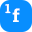
<style>
.page{position:relative;width:32px;height:32px;background:#088efe}
.page>*{position:absolute;margin:0}
.t1{font:12.8px "RobotoSlab-Bold";color:#ffffff}
.t2{font:17.6px "RobotoSlab-Bold";color:#ffffff;scale:1.06 1}
</style>
<div class="page">
<p class="t1" style="left:5px;top:4px;width:6px;height:10px">1</p>
<p class="t2" style="left:12px;top:8px;width:8px;height:14px">f</p>
</div>
